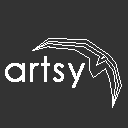
<style>
.page{position:relative;width:128px;height:128px;background:#333333}
.page>*{position:absolute;margin:0}
.t1{font:33px "CenturyGothic";letter-spacing:0.025em;color:#ffffff;font-weight:bold}
</style>
<div class="page">
<p class="t1" style="left:5px;top:56px;width:80px;height:32px">artsy</p>
</div>
